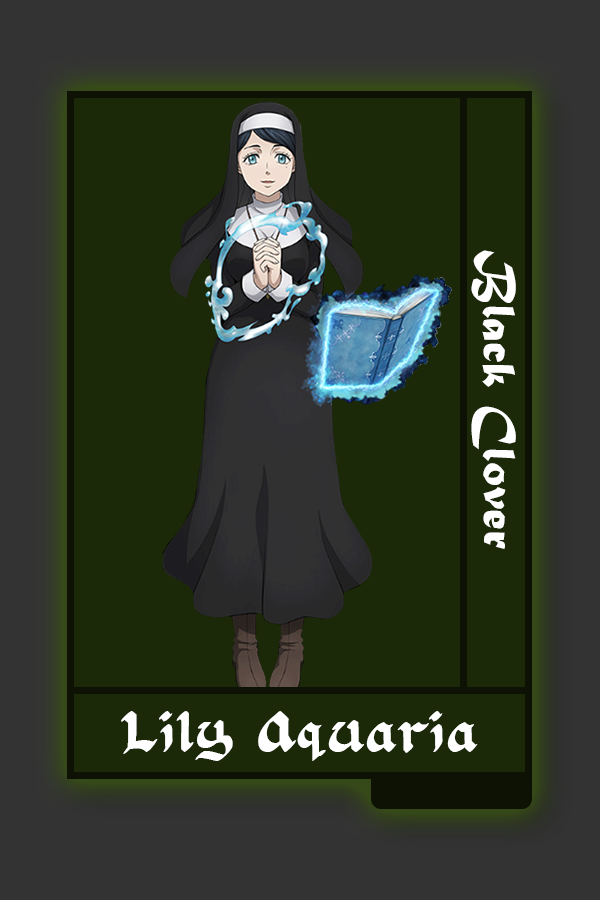
<style>
.page{position:relative;width:600px;height:900px;background:#1b2908}
.page>*{position:absolute;margin:0}
.t1{font:48.8px "MaturaMTScriptCapitals";color:#ffffff}
.t2{font:49.8px "FloranteatLaura";color:#ffffff}
</style>
<div class="page">
<p class="t1" style="left:471px;top:250px;width:45px;height:299px;rotate:90deg">Black Clover</p>
<p class="t2" style="left:121px;top:711px;width:357px;height:50px">Lily Aquaria</p>
</div>
